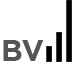
<style>
.page{position:relative;width:75px;height:67px;background:#ffffff}
.page>*{position:absolute;margin:0}
.t1{font:30.2px "GothamBold";color:#434343}
</style>
<div class="page">
<p class="t1" style="left:3px;top:40px;width:41px;height:21px;opacity:0.9">BV</p>
</div>
